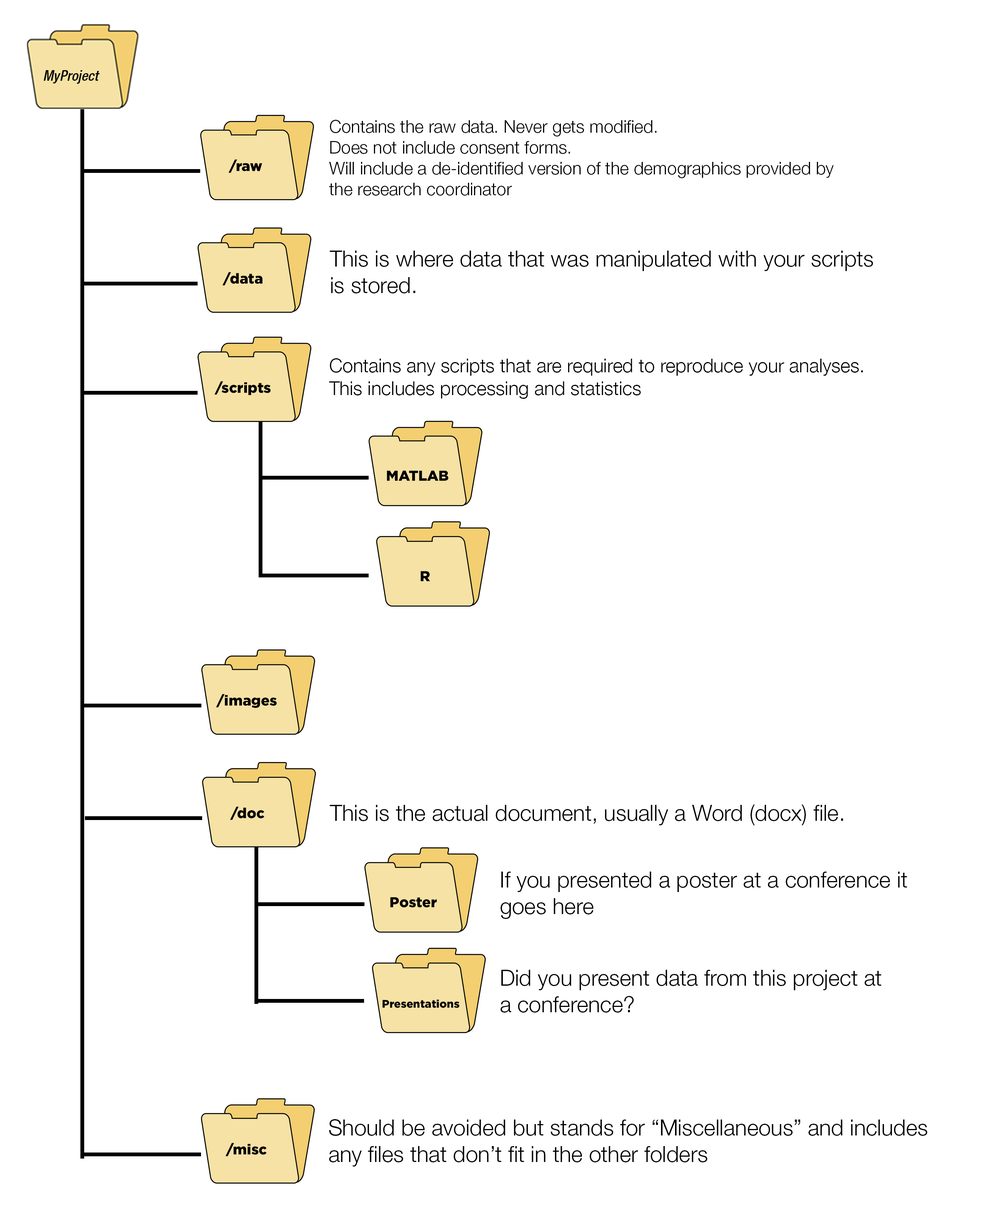
<style>
.page{position:relative;width:986px;height:1209px;background:#ffffff}
.page>*{position:absolute;margin:0}
.t1{font:14.4px "HelveticaNeueLTPro-MdCnO";color:#000000}
.t2{font:17.4px "HelveticaNeueLTPro-Lt";color:#000000}
.t3{font:14.4px "Gotham-Black";color:#000000}
.t4{font:22.1px "HelveticaNeueLTPro-Lt";color:#000000}
.t5{font:19px "HelveticaNeue-Light";color:#000000}
.t6{font:11.1px "Gotham-Black";color:#000000}
</style>
<div class="page">
<p class="t1" style="left:44px;top:70px;width:56px;height:14px">MyProject</p>
<p class="t2" style="left:329px;top:120px;width:505px;height:76px">Contains the raw data. Never gets modified. <br>Does not include consent forms. <br>Will include a de-identified version of the demographics provided by <br>the research coordinator</p>
<p class="t3" style="left:228px;top:159px;width:34px;height:14px">/raw</p>
<p class="t4" style="left:330px;top:251px;width:543px;height:43px">This is where data that was manipulated with your scripts<br>is stored.</p>
<p class="t3" style="left:222px;top:272px;width:40px;height:14px">/data</p>
<p class="t5" style="left:329px;top:358px;width:534px;height:41px">Contains any scripts that are required to reproduce your analyses.<br>This includes processing and statistics</p>
<p class="t3" style="left:214px;top:381px;width:57px;height:14px">/scripts</p>
<p class="t3" style="left:387px;top:471px;width:62px;height:10px">MATLAB</p>
<p class="t3" style="left:421px;top:571px;width:9px;height:10px">R</p>
<p class="t3" style="left:216px;top:694px;width:61px;height:14px">/images</p>
<p class="t3" style="left:230px;top:807px;width:34px;height:13px">/doc</p>
<p class="t3" style="left:230px;top:807px;width:34px;height:13px">/doc</p>
<p class="t4" style="left:330px;top:805px;width:513px;height:21px">This is the actual document, usually a Word (docx) file.</p>
<p class="t4" style="left:501px;top:872px;width:406px;height:47px">If you presented a poster at a conference it<br>goes here</p>
<p class="t3" style="left:390px;top:897px;width:47px;height:11px">Poster</p>
<p class="t4" style="left:501px;top:970px;width:380px;height:43px">Did you present data from this project at<br>a conference?</p>
<p class="t6" style="left:382px;top:1000px;width:78px;height:8px">Presentations</p>
<p class="t4" style="left:329px;top:1119px;width:598px;height:48px">Should be avoided but stands for “Miscellaneous” and includes<br>any files that don’t fit in the other folders</p>
<p class="t3" style="left:225px;top:1143px;width:42px;height:14px">/misc</p>
</div>
